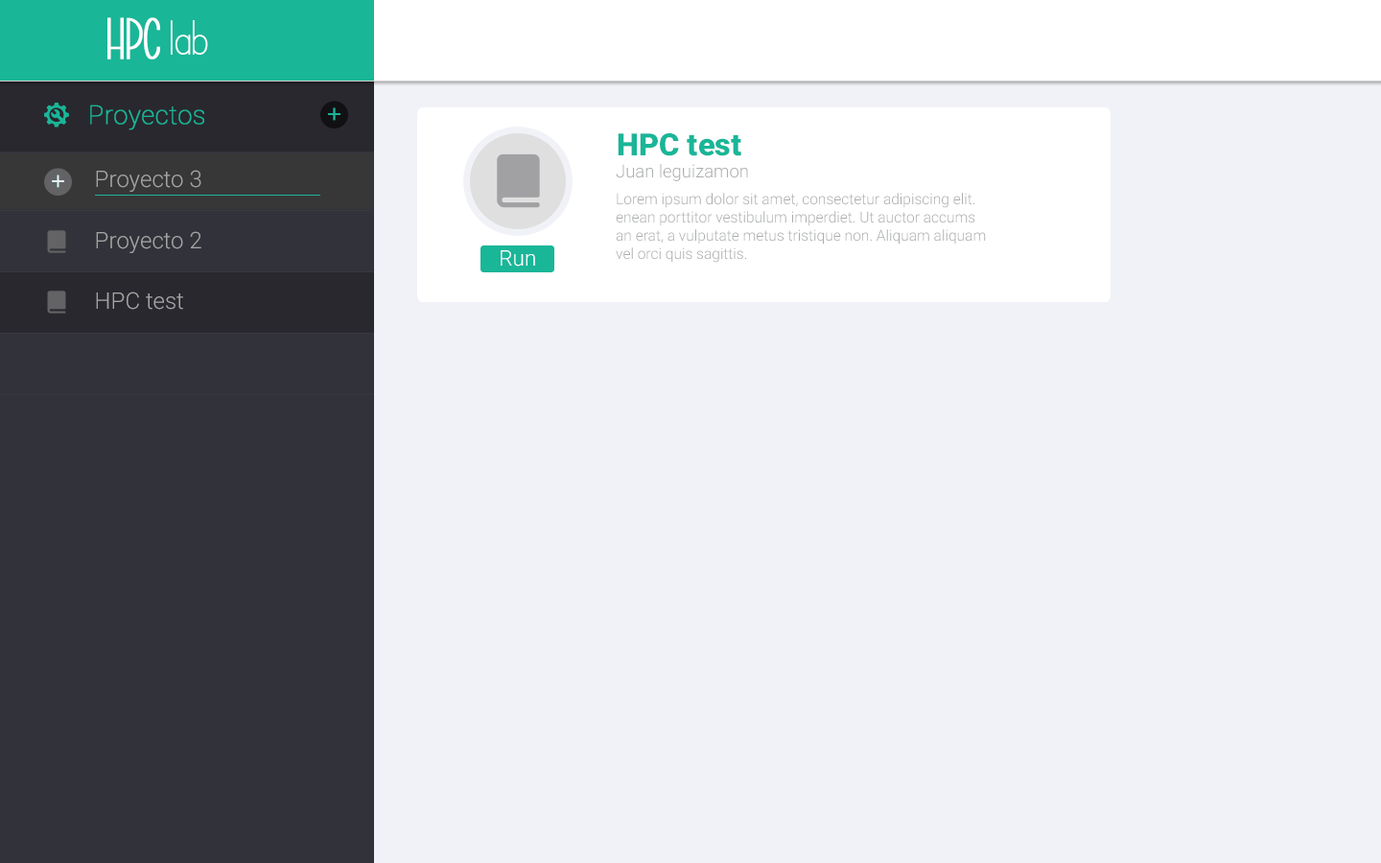
<style>
.page{position:relative;width:1381px;height:863px;background:#f1f2f7}
.page>*{position:absolute;margin:0}
.t1{font:58.4px "BriocheauPotiron";color:#ffffff;font-weight:bold}
.t2{font:58.4px "BriocheauPotiron";color:#ffffff}
.t3{font:26px "Roboto-Thin";color:#19b698;font-weight:bold}
.t4{font:30.7px "Roboto-Black";color:#19b698}
.t5{font:23px "Roboto-Light";color:#a5a5a5}
.t6{font:17.9px "Roboto-Light";color:#aaadac}
.t7{font:15px "Roboto-Light";color:#aaadac}
.t8{font:21.6px "Roboto-Light";color:#ffffff}
</style>
<div class="page">
<p class="t1" style="left:107px;top:17px;width:101px;height:42px">HPC<span class="t2"> lab</span></p>
<p class="t3" style="left:90px;top:105px;width:114px;height:25px">Proyectos</p>
<p class="t4" style="left:618px;top:133px;width:123px;height:23px">HPC test</p>
<p class="t5" style="left:96px;top:170px;width:105px;height:22px">Proyecto 3</p>
<p class="t6" style="left:616px;top:164px;width:132px;height:17px">Juan leguizamon</p>
<p class="t7" style="left:616px;top:193px;width:370px;height:70px">Lorem ipsum dolor sit amet, consectetur adipiscing elit.<br>enean porttitor vestibulum imperdiet. Ut auctor accums<br>an erat, a vulputate metus tristique non. Aliquam aliquam <br>vel orci quis sagittis.</p>
<p class="t5" style="left:96px;top:231px;width:105px;height:22px">Proyecto 2</p>
<p class="t8" style="left:501px;top:250px;width:34px;height:17px">Run</p>
<p class="t5" style="left:96px;top:292px;width:87px;height:18px">HPC test</p>
</div>
